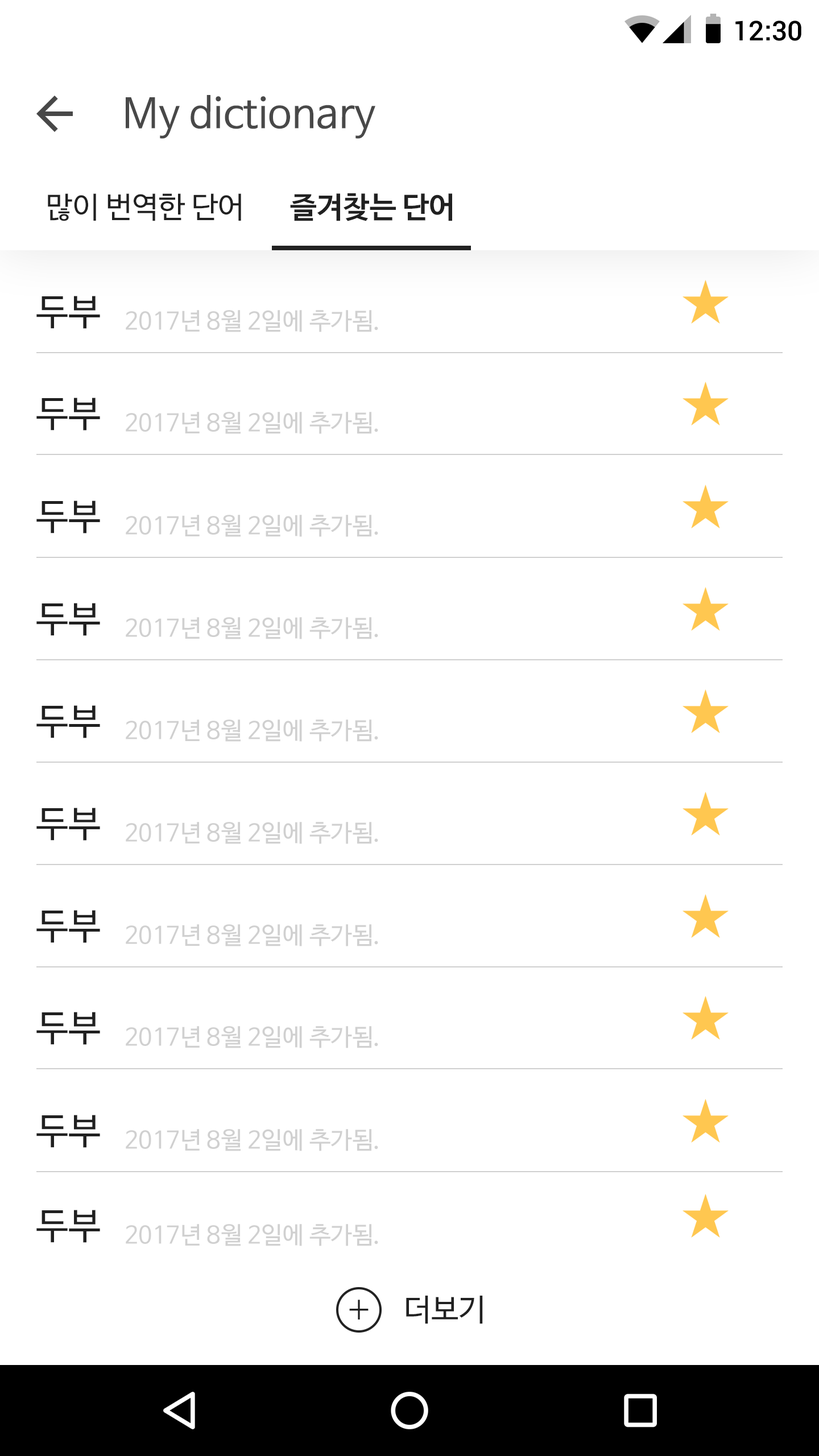
<style>
.page{position:relative;width:819px;height:1456px;background:#ffffff}
.page>*{position:absolute;margin:0}
.t1{font:27.3px "Roboto-Medium";color:#000000}
.t2{font:40.9px "NanumBarunGothic";color:#484848}
.t3{font:29.6px "NanumBarunGothic";color:#202020}
.t4{font:29.6px "NanumBarunGothicBold";color:#202020}
.t5{font:36.4px "NanumBarunGothic";color:#202020}
.t6{font:23.9px "NanumBarunGothic";color:#d0d0d0}
.t7{font:40.9px "NanumBarunGothicLight";color:#202020}
.t8{font:30.7px "NanumBarunGothic";color:#202020}
</style>
<div class="page">
<p class="t1" style="left:735px;top:20px;width:66px;height:21px">12:30</p>
<p class="t2" style="left:126px;top:95px;width:249px;height:44px">My dictionary</p>
<p class="t3" style="left:48px;top:193px;width:193px;height:28px">많이 번역한 단어</p>
<p class="t4" style="left:290px;top:193px;width:162px;height:28px">즐겨찾는 단어</p>
<p class="t5" style="left:36px;top:296px;width:64px;height:33px">두부</p>
<p class="t6" style="left:126px;top:310px;width:252px;height:22px">2017년 8월 2일에 추가됨.</p>
<p class="t5" style="left:36px;top:398px;width:64px;height:33px">두부</p>
<p class="t6" style="left:126px;top:412px;width:252px;height:22px">2017년 8월 2일에 추가됨.</p>
<p class="t5" style="left:36px;top:500px;width:64px;height:33px">두부</p>
<p class="t6" style="left:126px;top:515px;width:252px;height:22px">2017년 8월 2일에 추가됨.</p>
<p class="t5" style="left:36px;top:603px;width:64px;height:33px">두부</p>
<p class="t6" style="left:126px;top:617px;width:252px;height:22px">2017년 8월 2일에 추가됨.</p>
<p class="t5" style="left:36px;top:705px;width:64px;height:33px">두부</p>
<p class="t6" style="left:126px;top:719px;width:252px;height:23px">2017년 8월 2일에 추가됨.</p>
<p class="t5" style="left:36px;top:808px;width:64px;height:33px">두부</p>
<p class="t6" style="left:126px;top:822px;width:252px;height:22px">2017년 8월 2일에 추가됨.</p>
<p class="t5" style="left:36px;top:910px;width:64px;height:33px">두부</p>
<p class="t6" style="left:126px;top:924px;width:252px;height:22px">2017년 8월 2일에 추가됨.</p>
<p class="t5" style="left:36px;top:1012px;width:64px;height:33px">두부</p>
<p class="t6" style="left:126px;top:1026px;width:252px;height:22px">2017년 8월 2일에 추가됨.</p>
<p class="t5" style="left:36px;top:1115px;width:64px;height:33px">두부</p>
<p class="t6" style="left:126px;top:1129px;width:252px;height:22px">2017년 8월 2일에 추가됨.</p>
<p class="t5" style="left:36px;top:1210px;width:64px;height:33px">두부</p>
<p class="t6" style="left:126px;top:1224px;width:252px;height:22px">2017년 8월 2일에 추가됨.</p>
<p class="t7" style="left:349px;top:1300px;width:20px;height:19px">+</p>
<p class="t8" style="left:406px;top:1296px;width:77px;height:28px">더보기</p>
</div>
